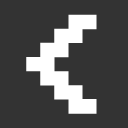
<style>
.page{position:relative;width:128px;height:128px;background:#333333}
.page>*{position:absolute;margin:0}
.t1{font:153.9px "Joystix";color:#ffffff}
</style>
<div class="page">
<p class="t1" style="left:26px;top:14px;width:71px;height:100px">&lt;</p>
</div>
